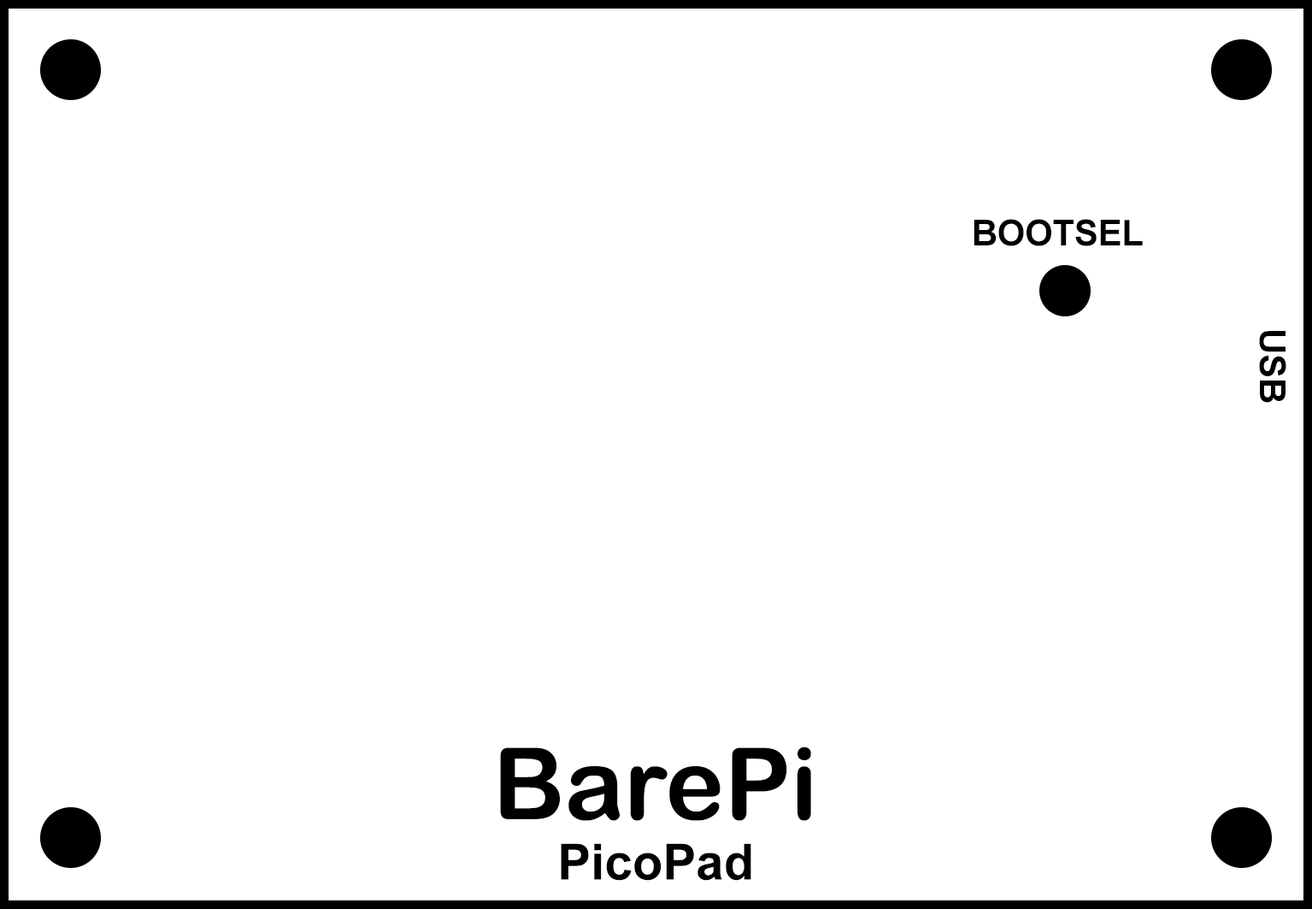
<style>
.page{position:relative;width:1312px;height:909px;background:#ffffff}
.page>*{position:absolute;margin:0}
.t1{font:35.6px "Arial-BoldMT";color:#000000}
.t2{font:99.7px "ArialRoundedMTBold";color:#000000}
.t3{font:49.9px "Arial-BoldMT";color:#000000}
</style>
<div class="page">
<p class="t1" style="left:974px;top:219px;width:169px;height:27px">BOOTSEL</p>
<p class="t1" style="left:1259px;top:331px;width:28px;height:72px;rotate:90deg">USB</p>
<p class="t2" style="left:500px;top:746px;width:311px;height:75px">BarePi</p>
<p class="t3" style="left:561px;top:843px;width:190px;height:38px">PicoPad</p>
</div>
